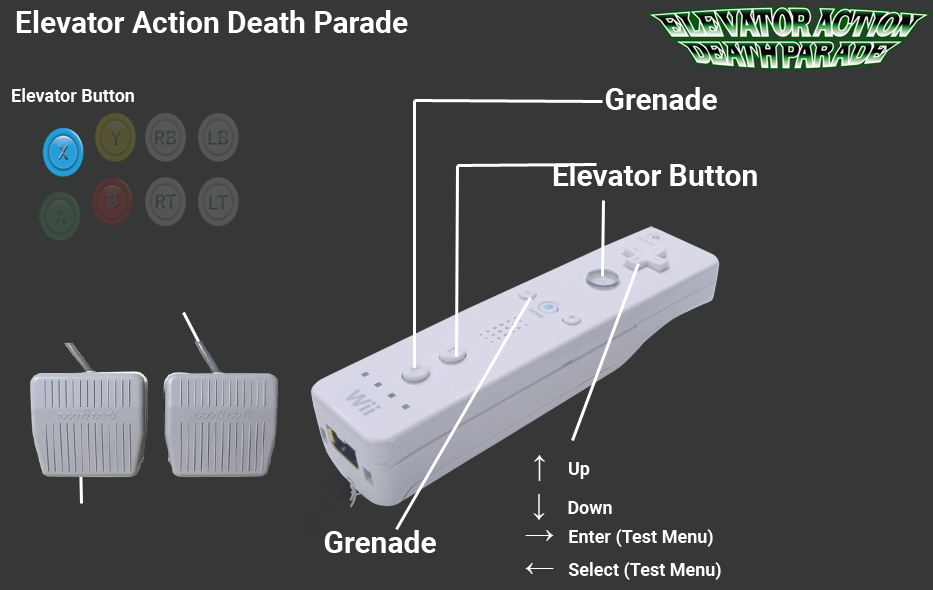
<style>
.page{position:relative;width:933px;height:590px;background:#363838}
.page>*{position:absolute;margin:0}
.t1{font:30px "Roboto-Bold";color:#ffffff}
.t2{font:18px "Roboto-Bold";color:#ffffff}
.t3{font:30px "MicrosoftSansSerif";color:#ffffff}
</style>
<div class="page">
<p class="t1" style="left:16px;top:10px;width:392px;height:23px">Elevator Action Death Parade</p>
<p class="t2" style="left:12px;top:88px;width:122px;height:14px">Elevator Button</p>
<p class="t1" style="left:605px;top:87px;width:112px;height:23px">Grenade</p>
<p class="t1" style="left:553px;top:163px;width:204px;height:23px">Elevator Button</p>
<p class="t2" style="left:534px;top:455px;width:56px;height:26px"><span class="t3">↑ </span>Up</p>
<p class="t2" style="left:533px;top:494px;width:79px;height:26px"><span class="t3">↓ </span>Down</p>
<p class="t1" style="left:324px;top:530px;width:112px;height:23px">Grenade</p>
<p class="t2" style="left:525px;top:529px;width:188px;height:18px"><span class="t3">→  </span>Enter (Test Menu)</p>
<p class="t2" style="left:525px;top:562px;width:196px;height:18px"><span class="t3">←  </span>Select (Test Menu)</p>
</div>
